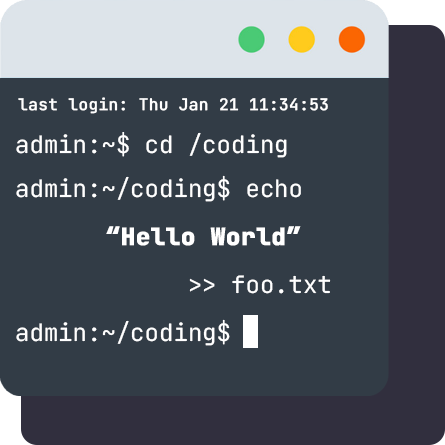
<style>
.page{position:relative;width:445px;height:445px;background:#323c46}
.page>*{position:absolute;margin:0}
.t1{font:16px "JetBrainsMono-Regular";color:#ffffff;font-weight:bold}
.t2{font:24px "JetBrainsMono-Regular";color:#ffffff}
.t3{font:24px/48px "JetBrainsMono-Regular";color:#ffffff}
.t4{font:24px/48px "JetBrainsMono-ExtraBold";color:#ffffff;font-weight:bold}
</style>
<div class="page">
<p class="t1" style="left:18px;top:97px;width:310px;height:17px">last login: Thu Jan 21 11:34:53</p>
<p class="t2" style="left:16px;top:132px;width:271px;height:26px">admin:~$ cd /coding</p>
<p class="t3" style="left:16px;top:175px;width:315px;height:171px">admin:~/coding$ echo <br>      <span class="t4">“Hello World”<br></span>            &gt;&gt; foo.txt<br>admin:~/coding$</p>
</div>
